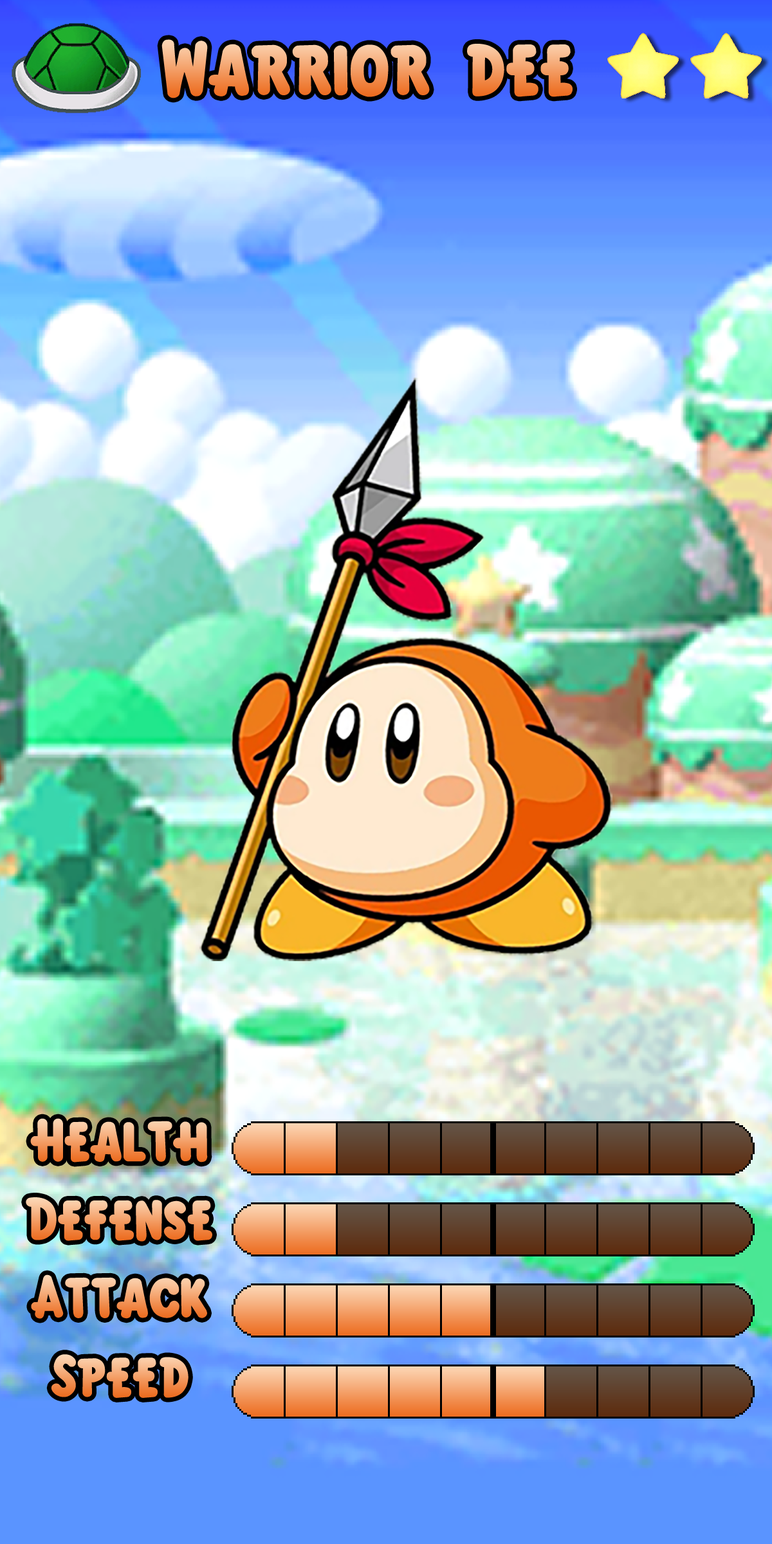
<style>
.page{position:relative;width:772px;height:1544px}
.page>*{position:absolute;margin:0}
.t1{font:120.3px "KirbyClassic"}
.t2{font:92.7px "KirbyClassic"}
</style>
<div class="page">
<p class="t1" style="left:162px;top:39px;width:411px;height:59px">Warrior dee</p>
<p class="t2" style="left:30px;top:1118px;width:178px;height:45px">Health</p>
<p class="t2" style="left:26px;top:1197px;width:186px;height:45px">Defense</p>
<p class="t2" style="left:31px;top:1275px;width:176px;height:44px">Attack</p>
<p class="t2" style="left:51px;top:1354px;width:138px;height:44px">Speed</p>
</div>
